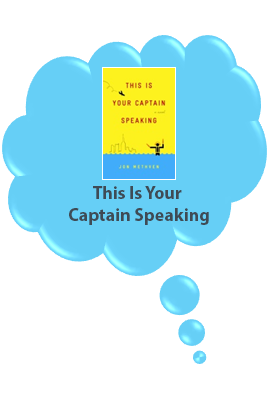
<style>
.page{position:relative;width:269px;height:400px;background:#ffffff}
.page>*{position:absolute;margin:0}
.t1{font:18px "MyriadPro-Bold";color:#3f4b55}
</style>
<div class="page">
<p class="t1" style="left:69px;top:186px;width:140px;height:39px;text-align:center">This Is Your <br>Captain Speaking</p>
</div>
